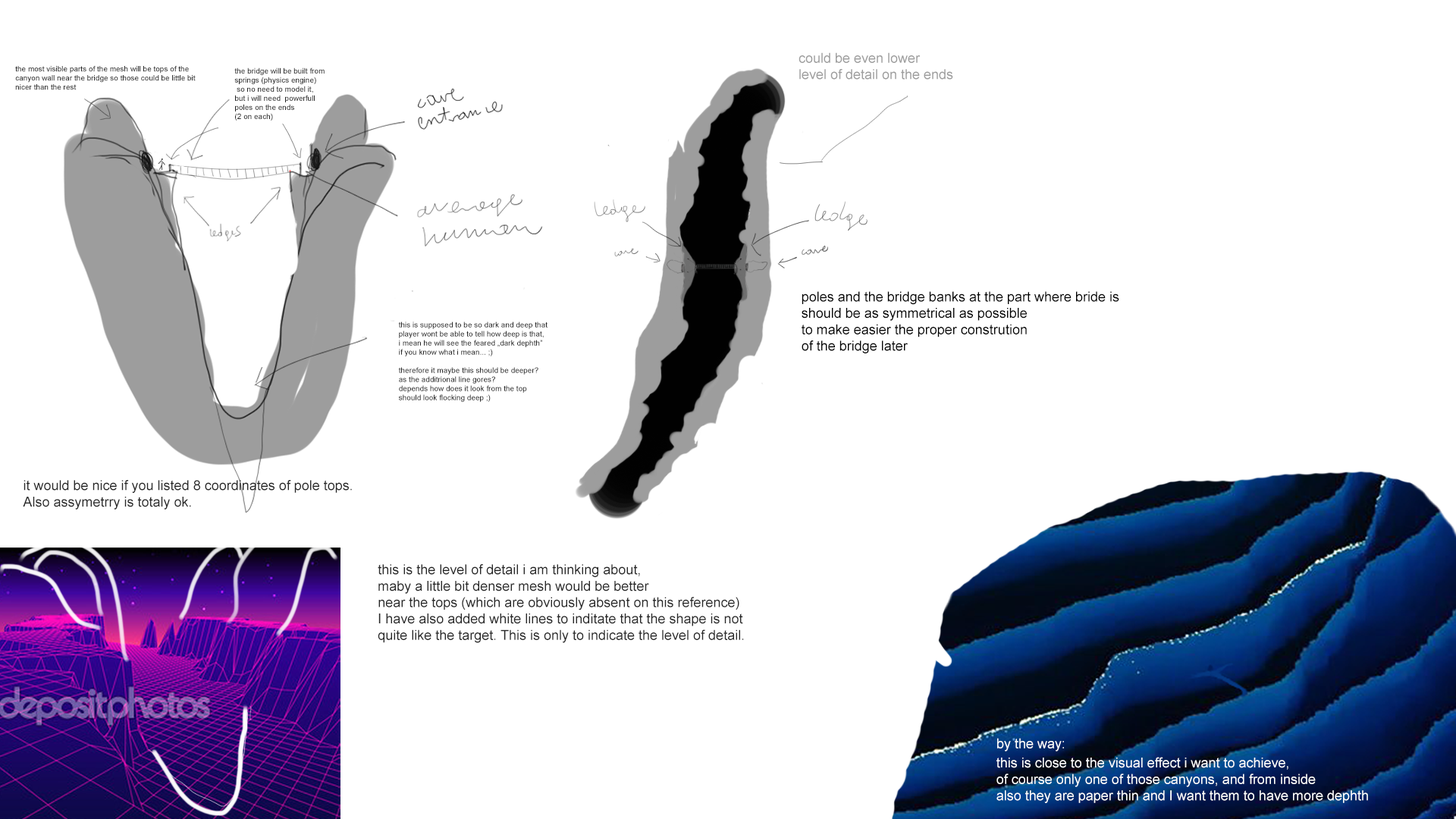
<style>
.page{position:relative;width:1456px;height:819px;background:#ffffff}
.page>*{position:absolute;margin:0}
.t1{font:13.6px "ArialMT";color:#9d9d9d}
.t2{font:7.6px "ArialMT";color:#272727}
.t3{font:13.6px "ArialMT";color:#000000}
.t4{font:13.6px "ArialMT";color:#272727}
.t5{font:13.6px "ArialMT";color:#ffffff}
</style>
<div class="page">
<p class="t1" style="left:799px;top:52px;width:154px;height:28px">could be even lower <br>level of detail on the ends</p>
<p class="t2" style="left:15px;top:66px;width:181px;height:24px">the most visible parts of the mesh will be tops of the<br>canyon wall near the bridge so those could be little bit <br>nicer than the rest</p>
<p class="t2" style="left:234px;top:67px;width:91px;height:54px">the bridge will be built from<br>springs (physics engine)<br> so no need to model it,<br>but i will need  powerfull <br>poles on the ends <br>(2 on each)</p>
<p class="t3" style="left:802px;top:291px;width:317px;height:62px">poles and the bridge banks at the part where bride is<br>should be as symmetrical as possible<br>to make easier the proper constrution <br>of the bridge later</p>
<p class="t2" style="left:398px;top:322px;width:150px;height:80px">this is supposed to be so dark and deep that <br>player wont be able to tell how deep is that, <br>i mean he will see the feared „dark dephth” <br>if you know what i mean... ;)<br><br>therefore it maybe this should be deeper? <br>as the additrional line gores?<br>depends how does it look from the top<br>should look flocking deep ;)</p>
<p class="t4" style="left:23px;top:480px;width:329px;height:30px">it would be nice if you listed 8 coordinates of pole tops.<br>Also assymetrry is totaly ok.</p>
<p class="t4" style="left:378px;top:564px;width:366px;height:79px">this is the level of detail i am thinking about,<br>maby a little bit denser mesh would be better<br>near the tops (which are obviously absent on this reference)<br>I have also added white lines to inditate that the shape is not <br>quite like the target. This is only to indicate the level of detail.</p>
<p class="t5" style="left:997px;top:738px;width:67px;height:13px">by the way:</p>
<p class="t5" style="left:996px;top:757px;width:372px;height:46px">this is close to the visual effect i want to achieve,<br>of course only one of those canyons, and from inside<br>also they are paper thin and I want them to have more dephth</p>
</div>
